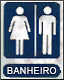
<style>
.page{position:relative;width:64px;height:80px}
.page>*{position:absolute;margin:0}
.t1{font:9.3px "ArialMT";letter-spacing:0.02em;color:#ffffff}
</style>
<div class="page">
<p class="t1" style="left:7px;top:67px;width:50px;height:7px">BANHEIRO</p>
</div>
